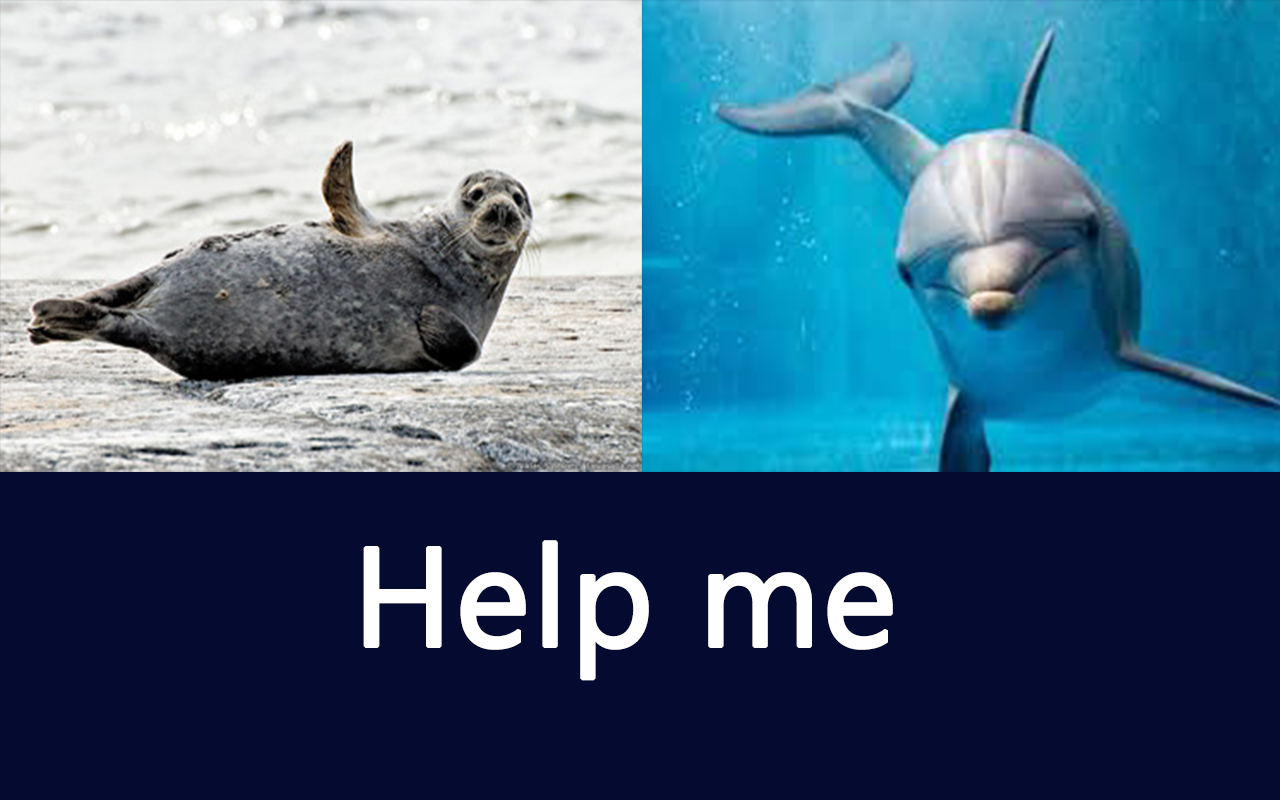
<style>
.page{position:relative;width:1280px;height:800px;background:#040a30}
.page>*{position:absolute;margin:0}
.t1{font:140px "SegoeUI";color:#ffffff;font-weight:bold}
</style>
<div class="page">
<p class="t1" style="left:363px;top:540px;width:530px;height:141px">Help me</p>
</div>
